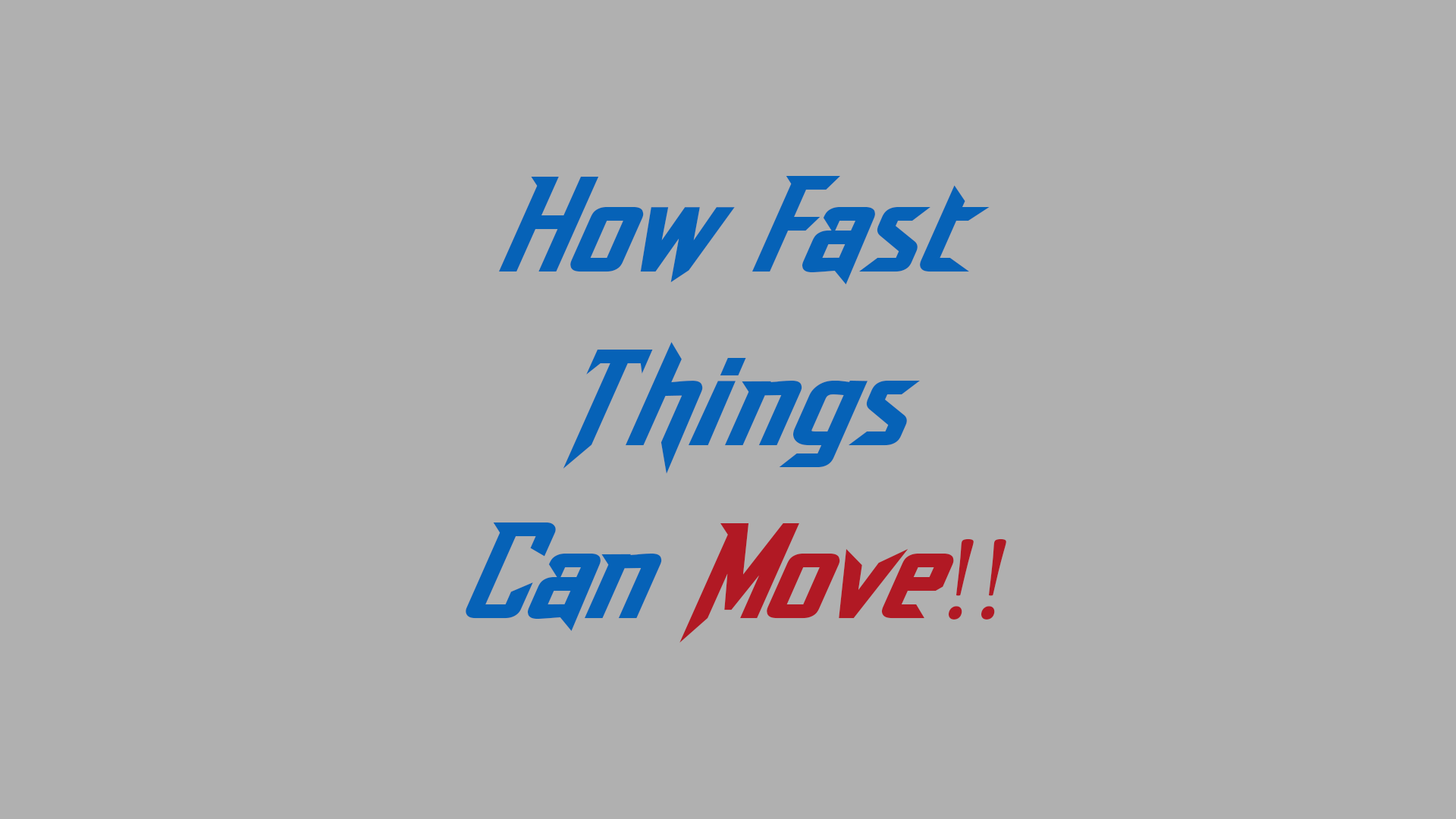
<style>
.page{position:relative;width:1456px;height:819px;background:#b0b0b0}
.page>*{position:absolute;margin:0}
.t1{font:144.5px "DashDemo";color:#0662b7;font-style:italic}
.t2{font:144.5px "DashDemo";color:#b11924;font-style:italic}
.t3{font:144.5px "AdobeThai-Regular";color:#b11924;font-style:italic}
</style>
<div class="page">
<p class="t1" style="left:466px;top:176px;width:540px;height:467px;text-align:center">How Fast<br>Things<br>Can <span class="t2">Move</span><span class="t3">!!</span></p>
</div>
